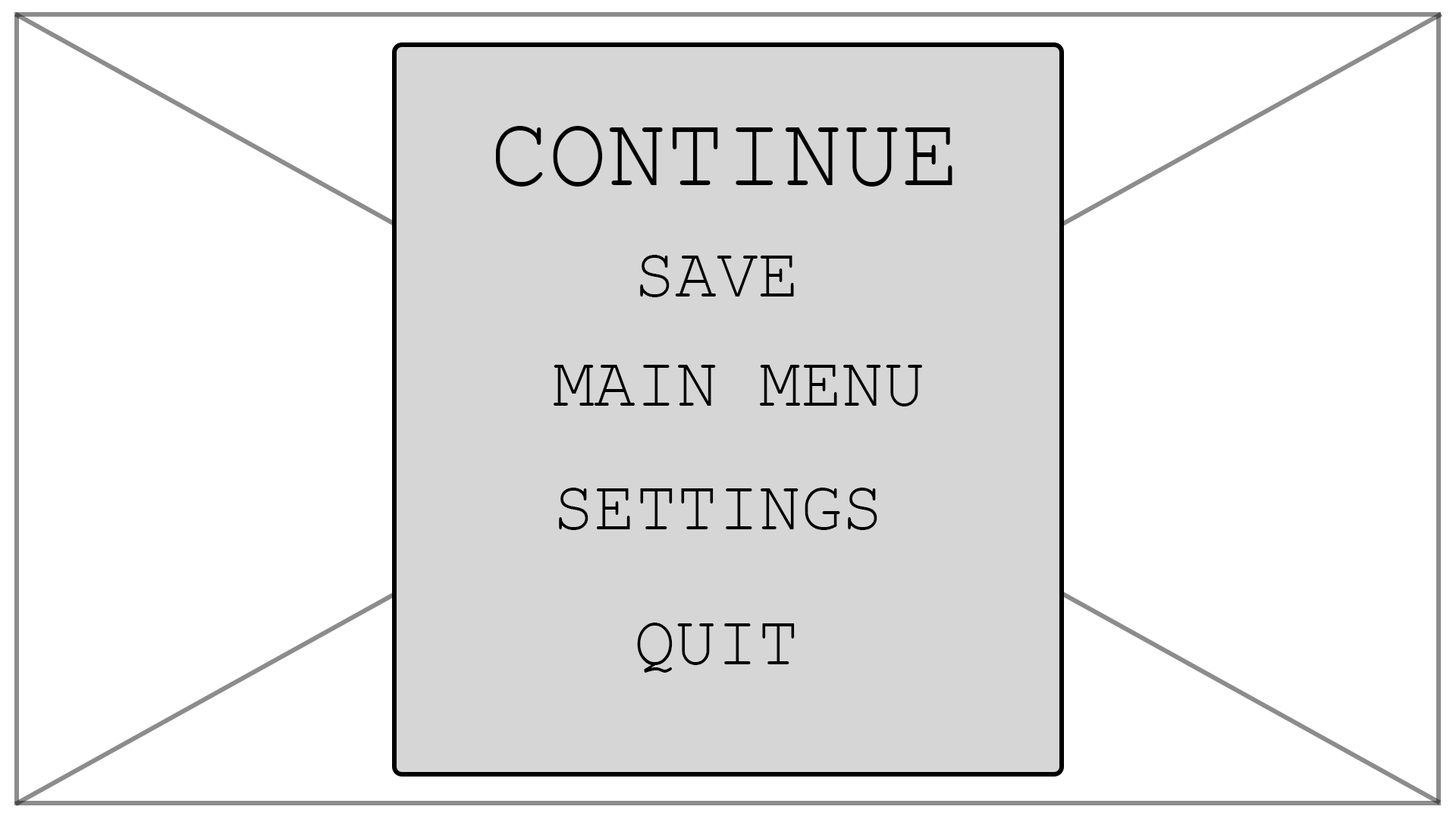
<style>
.page{position:relative;width:1456px;height:819px;background:#ffffff}
.page>*{position:absolute;margin:0}
.t1{font:101.4px "CourierNewPSMT";color:#000000;scale:0.97 1}
.t2{font:71.3px "CourierNewPSMT";color:#000000;scale:0.97 1}
</style>
<div class="page">
<p class="t1" style="left:495px;top:126px;width:457px;height:61px">CONTINUE</p>
<p class="t2" style="left:640px;top:255px;width:154px;height:42px">SAVE</p>
<p class="t2" style="left:554px;top:365px;width:368px;height:41px">MAIN MENU</p>
<p class="t2" style="left:559px;top:488px;width:318px;height:42px">SETTINGS</p>
<p class="t2" style="left:637px;top:623px;width:158px;height:50px">QUIT</p>
</div>
